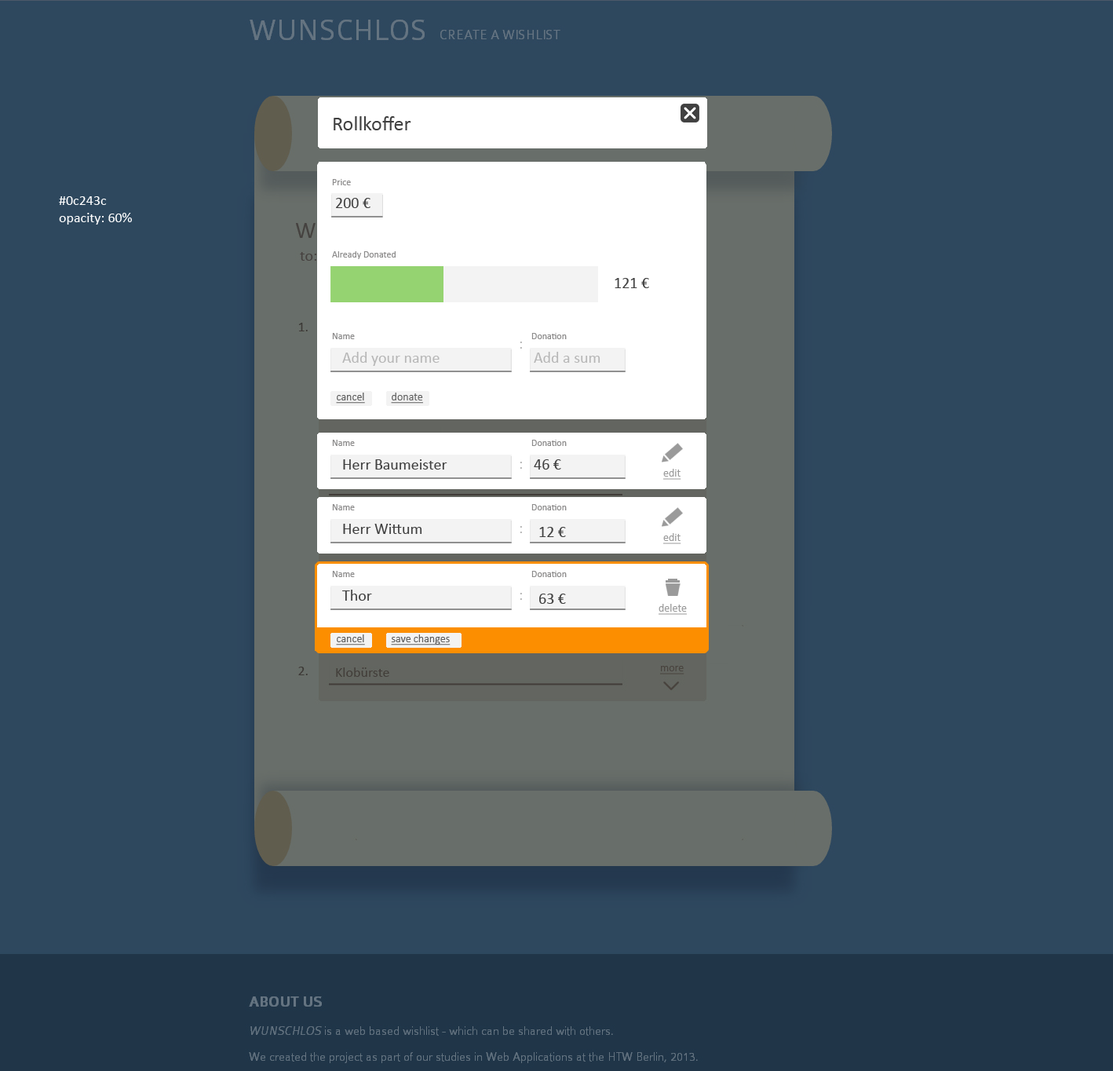
<style>
.page{position:relative;width:1113px;height:1071px;background:#2e485e}
.page>*{position:absolute;margin:0}
.t1{font:20.4px "Calibri";color:#414141}
.t2{font:9.4px "Calibri";color:#8d8c8c}
.t3{font:14.1px "Calibri";color:#ffffff}
.t4{font:15.7px "Calibri";color:#414141}
.t5{font:15.7px "Calibri";color:#b7b7b7}
.t6{font:11px "Calibri";color:#606060;text-decoration:underline}
.t7{font:11px "Calibri";color:#9a9a9a;text-decoration:underline}
</style>
<div class="page">
<p class="t1" style="left:334px;top:116px;width:77px;height:14px">Rollkoffer</p>
<p class="t2" style="left:332px;top:179px;width:19px;height:6px">Price</p>
<p class="t3" style="left:59px;top:196px;width:73px;height:29px">#0c243c  <br>opacity: 60%</p>
<p class="t4" style="left:336px;top:198px;width:35px;height:10px">200 €</p>
<p class="t2" style="left:332px;top:251px;width:64px;height:8px">Already Donated</p>
<p class="t4" style="left:615px;top:278px;width:34px;height:10px">121 €</p>
<p class="t2" style="left:332px;top:333px;width:23px;height:6px">Name</p>
<p class="t5" style="left:520px;top:342px;width:2px;height:7px">:</p>
<p class="t2" style="left:532px;top:333px;width:35px;height:6px">Donation</p>
<p class="t5" style="left:342px;top:352px;width:98px;height:14px">Add your name</p>
<p class="t5" style="left:534px;top:352px;width:67px;height:11px">Add a sum</p>
<p class="t6" style="left:336px;top:393px;width:29px;height:11px">cancel</p>
<p class="t6" style="left:391px;top:393px;width:32px;height:11px">donate</p>
<p class="t2" style="left:332px;top:440px;width:23px;height:6px">Name</p>
<p class="t2" style="left:532px;top:440px;width:35px;height:6px">Donation</p>
<p class="t4" style="left:343px;top:459px;width:105px;height:11px">Herr Baumeister</p>
<p class="t5" style="left:520px;top:462px;width:2px;height:7px">:</p>
<p class="t4" style="left:534px;top:459px;width:27px;height:11px">46 €</p>
<p class="t7" style="left:663px;top:469px;width:19px;height:11px">edit</p>
<p class="t2" style="left:332px;top:504px;width:23px;height:6px">Name</p>
<p class="t2" style="left:532px;top:504px;width:35px;height:6px">Donation</p>
<p class="t4" style="left:343px;top:524px;width:79px;height:10px">Herr Wittum</p>
<p class="t5" style="left:520px;top:526px;width:2px;height:7px">:</p>
<p class="t4" style="left:539px;top:527px;width:27px;height:10px">12 €</p>
<p class="t7" style="left:663px;top:533px;width:19px;height:11px">edit</p>
<p class="t2" style="left:332px;top:571px;width:23px;height:6px">Name</p>
<p class="t2" style="left:532px;top:571px;width:35px;height:6px">Donation</p>
<p class="t4" style="left:342px;top:590px;width:30px;height:11px">Thor</p>
<p class="t5" style="left:520px;top:593px;width:2px;height:7px">:</p>
<p class="t4" style="left:539px;top:594px;width:27px;height:10px">63 €</p>
<p class="t7" style="left:659px;top:604px;width:28px;height:11px">delete</p>
<p class="t6" style="left:336px;top:634px;width:29px;height:11px">cancel</p>
<p class="t6" style="left:391px;top:634px;width:60px;height:11px">save changes</p>
</div>
